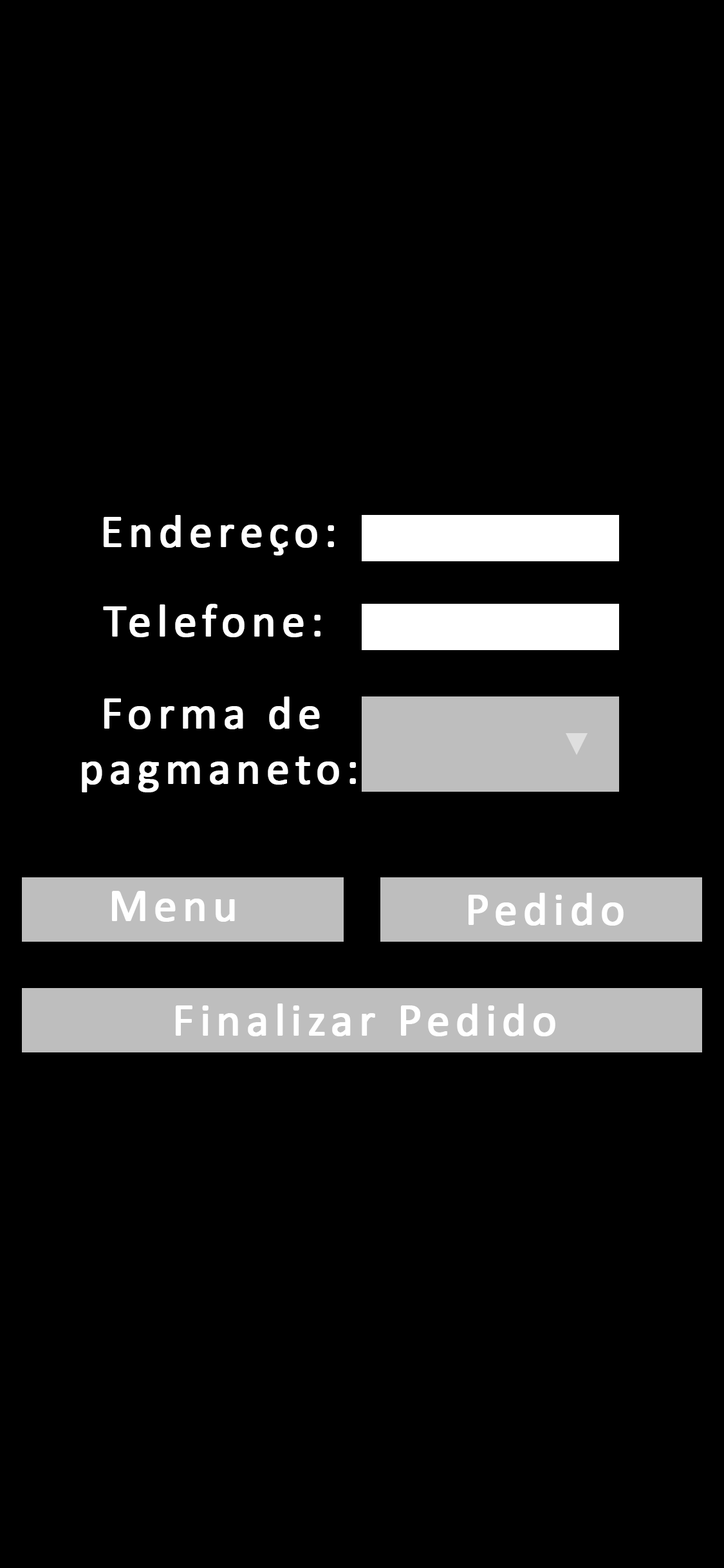
<style>
.page{position:relative;width:724px;height:1568px;background:#000000}
.page>*{position:absolute;margin:0}
.t1{font:46.3px "Calibri";letter-spacing:0.1em;color:#ffffff;font-weight:bold}
</style>
<div class="page">
<p class="t1" style="left:104px;top:515px;width:230px;height:40px">Endereço:</p>
<p class="t1" style="left:103px;top:604px;width:218px;height:33px">Telefone:</p>
<p class="t1" style="left:82px;top:696px;width:274px;height:96px;text-align:center">Forma de <br>pagmaneto:</p>
<p class="t1" style="left:112px;top:891px;width:123px;height:31px">Menu</p>
<p class="t1" style="left:469px;top:893px;width:155px;height:33px">Pedido</p>
<p class="t1" style="left:176px;top:1003px;width:379px;height:33px">Finalizar Pedido</p>
</div>
